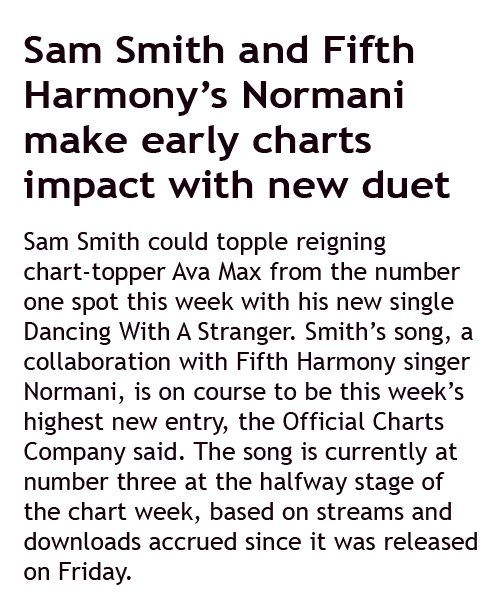
<style>
.page{position:relative;width:500px;height:600px;background:#ffffff}
.page>*{position:absolute;margin:0}
.t1{font:37.5px "TrebuchetMS-Bold";color:#17020c;scale:1.11 1}
.t2{font:25px "TrebuchetMS";color:#17020c}
</style>
<div class="page">
<p class="t1" style="left:24px;top:35px;width:426px;height:171px">Sam Smith and Fifth <br>Harmony’s Normani <br>make early charts <br>impact with new duet</p>
<p class="t2" style="left:24px;top:232px;width:453px;height:353px">Sam Smith could topple reigning <br>chart-topper Ava Max from the number <br>one spot this week with his new single <br>Dancing With A Stranger. Smith’s song, a <br>collaboration with Fifth Harmony singer <br>Normani, is on course to be this week’s <br>highest new entry, the Official Charts <br>Company said. The song is currently at <br>number three at the halfway stage of <br>the chart week, based on streams and <br>downloads accrued since it was released<br>on Friday.</p>
</div>
